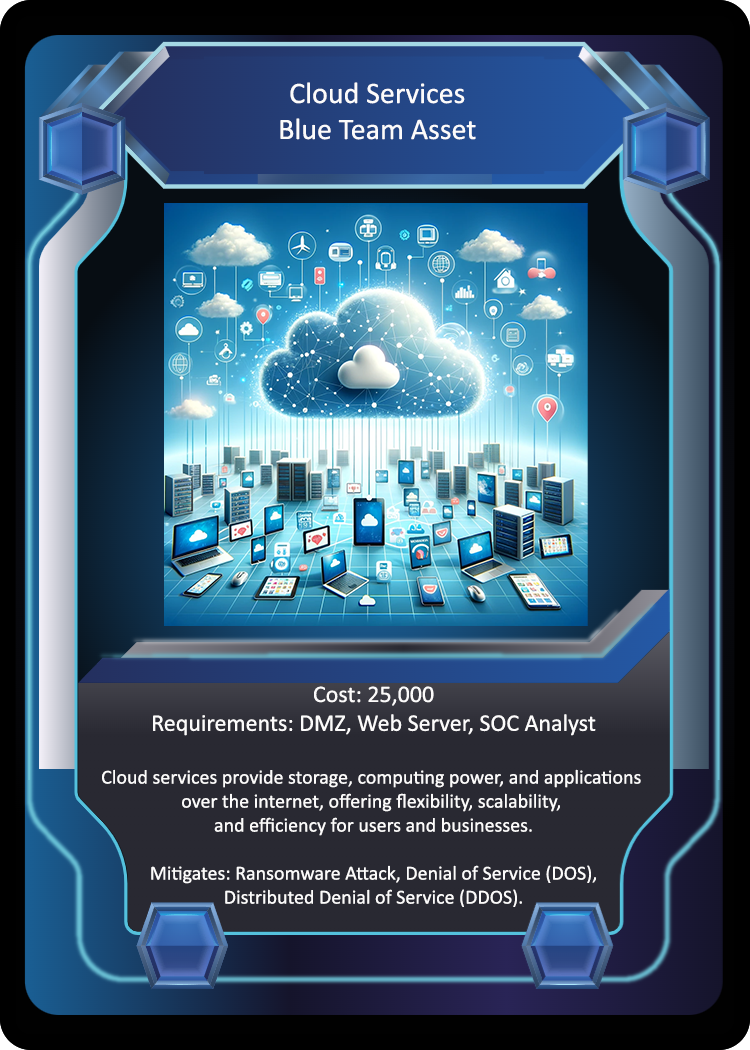
<style>
.page{position:relative;width:750px;height:1050px}
.page>*{position:absolute;margin:0}
.t1{font:30px "Calibri";color:#fcfbfb}
.t2{font:20px "Calibri";color:#fcfbfb}
.t3{font:24px "Calibri";color:#fcfbfb}
</style>
<div class="page">
<p class="t1" style="left:280px;top:82px;width:196px;height:58px;text-align:center">Cloud Services<br>Blue Team Asset</p>
<p class="t2" style="left:102px;top:686px;width:539px;height:221px;text-align:center"><span class="t3">Cost: 25,000<br>Requirements: DMZ, Web Server, SOC Analyst<br><br></span>Cloud services provide storage, computing power, and applications <br>over the internet, offering flexibility, scalability, <br>and efficiency for users and businesses.<br><br>Mitigates: Ransomware Attack, Denial of Service (DOS),<br>Distributed Denial of Service (DDOS).</p>
</div>
